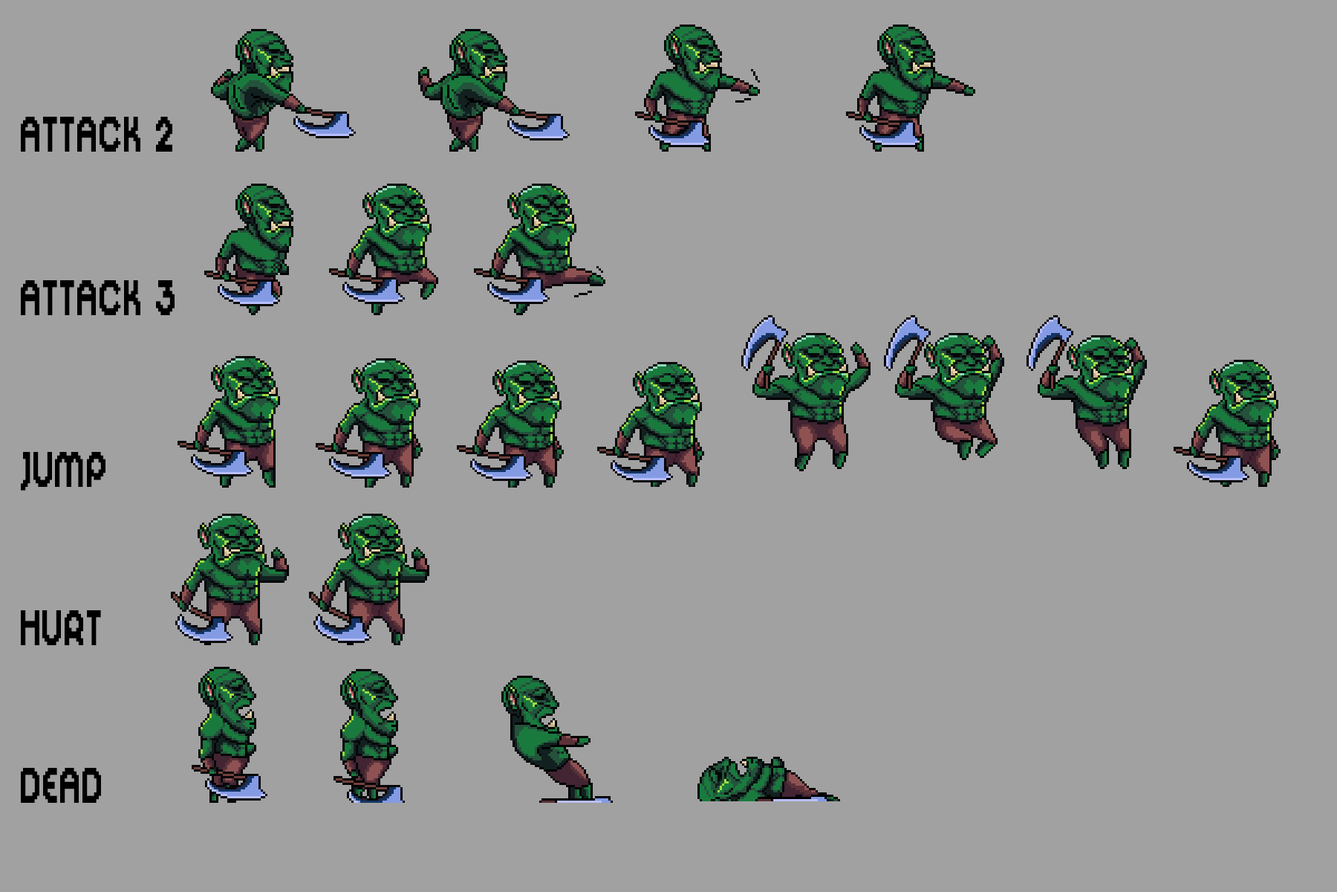
<style>
.page{position:relative;width:1337px;height:892px;background:#a1a1a1}
.page>*{position:absolute;margin:0}
.t1{font:55.7px "DigitalDisco";letter-spacing:0.03em;color:#000000;scale:0.67 1}
</style>
<div class="page">
<p class="t1" style="left:21px;top:117px;width:151px;height:35px">ATTACK 2<br><br> 2 3</p>
<p class="t1" style="left:21px;top:280px;width:154px;height:35px">ATTACK 3</p>
<p class="t1" style="left:21px;top:452px;width:85px;height:38px">JUMP</p>
<p class="t1" style="left:21px;top:610px;width:80px;height:35px">HURT</p>
<p class="t1" style="left:21px;top:768px;width:80px;height:34px">DEAD</p>
</div>
